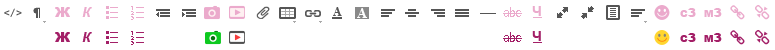
<style>
.page{position:relative;width:775px;height:50px;background:#ffffff}
.page>*{position:absolute;margin:0}
.t1{font:14px "Arial-BoldMT";color:#ebaacc}
.t2{font:14px "Arial-Black";color:#ebaacc}
.t3{font:14px "Arial-BoldItalicMT";color:#ebaacc}
.t4{font:13.2px "ArialMT";color:#ebaacc;scale:0.83 1}
.t5{font:10px "Arial-Black";color:#ebaacc}
.t6{font:12px "Arial-Black";color:#ebaacc}
.t7{font:14px "Arial-Black";color:#a31f67}
.t8{font:14px "Arial-BoldItalicMT";color:#a31f67}
.t9{font:13.2px "ArialMT";color:#a31f67;scale:0.83 1}
.t10{font:14px "Arial-BoldMT";color:#a31f67}
.t11{font:10px "Arial-Black";color:#a31f67}
.t12{font:12px "Arial-Black";color:#a31f67}
</style>
<div class="page">
<p class="t1" style="left:532px;top:6px;width:9px;height:10px">Ч</p>
<p class="t2" style="left:55px;top:7px;width:15px;height:10px">Ж</p>
<p class="t3" style="left:82px;top:7px;width:10px;height:10px">К</p>
<p class="t4" style="left:504px;top:7px;width:17px;height:10px">abc</p>
<p class="t5" style="left:680px;top:8px;width:16px;height:9px">С<span class="t6">З</span></p>
<p class="t5" style="left:704px;top:8px;width:18px;height:9px">М<span class="t6">З</span></p>
<p class="t7" style="left:55px;top:32px;width:15px;height:10px">Ж</p>
<p class="t8" style="left:82px;top:32px;width:10px;height:10px">К</p>
<p class="t9" style="left:504px;top:32px;width:17px;height:10px">abc</p>
<p class="t10" style="left:532px;top:31px;width:9px;height:10px">Ч</p>
<p class="t11" style="left:680px;top:33px;width:16px;height:9px">С<span class="t12">З</span></p>
<p class="t11" style="left:704px;top:33px;width:18px;height:9px">М<span class="t12">З</span></p>
</div>
